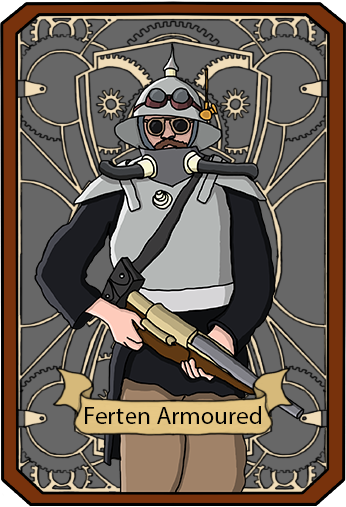
<style>
.page{position:relative;width:346px;height:507px;background:#676767}
.page>*{position:absolute;margin:0}
.t1{font:25px "MyriadPro-Regular";color:#000000}
</style>
<div class="page">
<p class="t1" style="left:85px;top:406px;width:176px;height:18px">Ferten Armoured</p>
</div>
